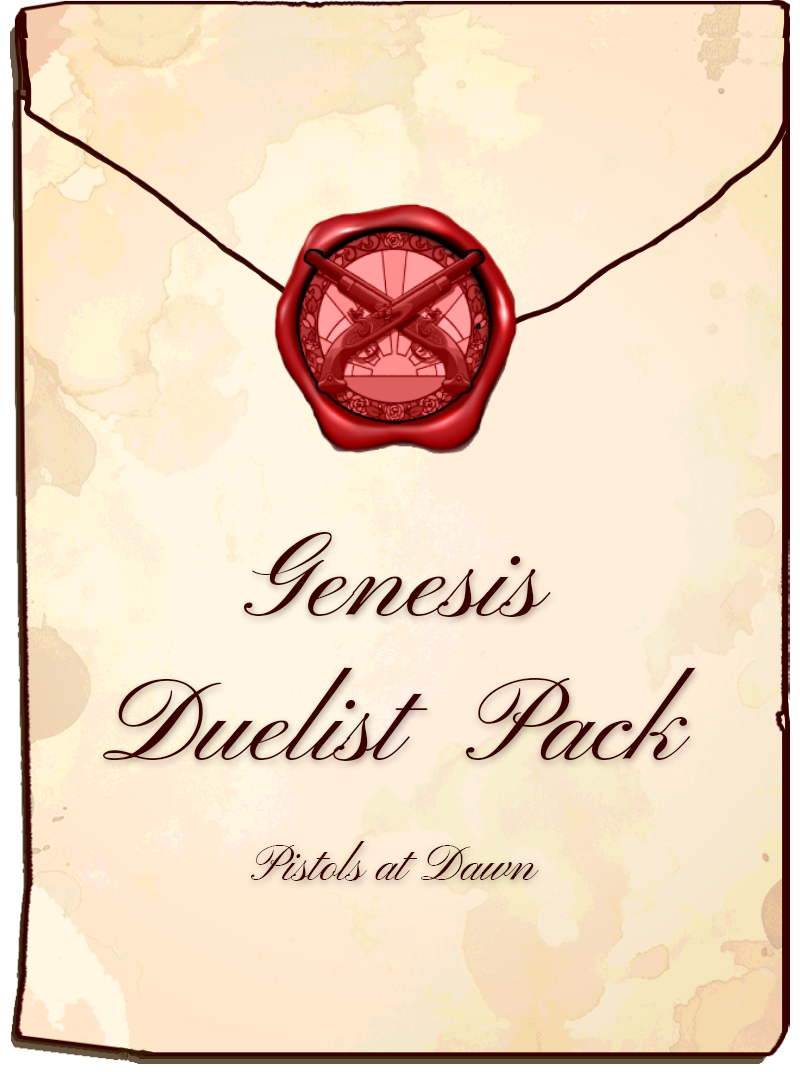
<style>
.page{position:relative;width:800px;height:1072px}
.page>*{position:absolute;margin:0}
.t1{font:120px "PinyonScript-Regular";color:#390000}
.t2{font:50px "PinyonScript-Regular";color:#390000}
</style>
<div class="page">
<p class="t1" style="left:103px;top:532px;width:593px;height:349px;text-align:center">Genesis<br>Duelist  Pack<br><span class="t2"><br>Pistols at Dawn</span></p>
</div>
